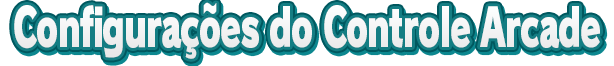
<style>
.page{position:relative;width:614px;height:66px;background:#ffffff}
.page>*{position:absolute;margin:0}
.t1{font:52px "RodinPro-UB";letter-spacing:-0.039em;color:#f2f2f3;scale:0.64 1}
</style>
<div class="page">
<p class="t1" style="left:14px;top:2px;width:586px;height:57px">Configurações do Controle Arcade</p>
</div>
